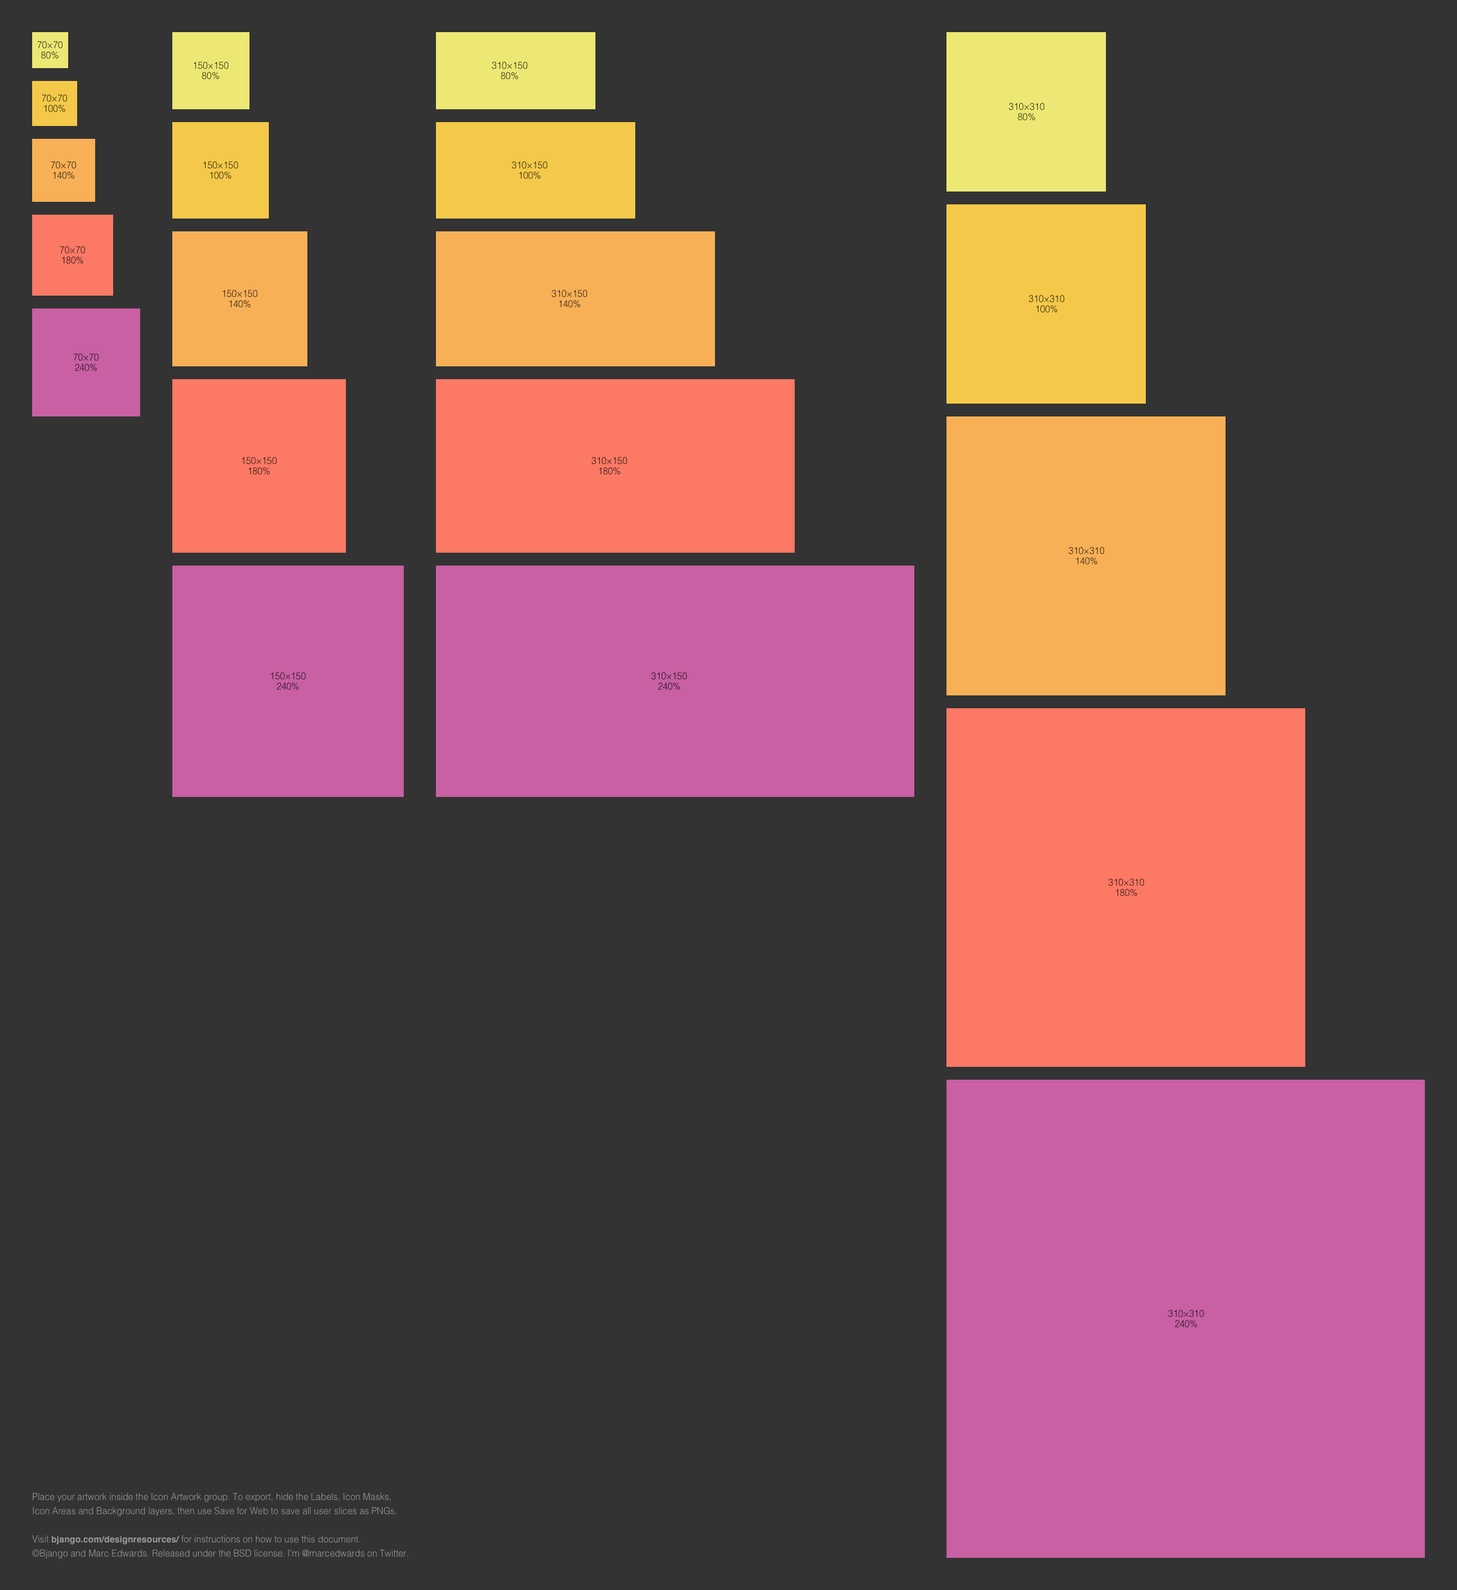
<style>
.page{position:relative;width:1457px;height:1590px;background:#333333}
.page>*{position:absolute;margin:0}
.t1{font:9px/10.3px "Helvetica-Light";color:#2f2e17}
.t2{font:9px/10.3px "Helvetica-Light";color:#31280f}
.t3{font:9px/10.3px "Helvetica-Light";color:#322311}
.t4{font:9px/10.3px "Helvetica-Light";color:#321814}
.t5{font:9px/10.3px "Helvetica-Light"}
.t6{font:9px/10.3px "Helvetica-Light";color:#281321}
.t7{font:9px/14.1px "Helvetica-Light";color:#999999}
.t8{font:9px/14.1px "Helvetica-Bold";color:#999999}
</style>
<div class="page">
<p class="t1" style="left:37px;top:41px;width:26px;height:18px;text-align:center">70×70<br>80%</p>
<p class="t1" style="left:194px;top:62px;width:35px;height:18px;text-align:center">150×150<br>80%</p>
<p class="t1" style="left:492px;top:62px;width:36px;height:18px;text-align:center">310×150<br>80%</p>
<p class="t2" style="left:42px;top:94px;width:26px;height:19px;text-align:center">70×70<br>100%</p>
<p class="t1" style="left:1009px;top:103px;width:36px;height:18px;text-align:center">310×310<br>80%</p>
<p class="t3" style="left:51px;top:161px;width:25px;height:18px;text-align:center">70×70<br>140%</p>
<p class="t2" style="left:203px;top:161px;width:36px;height:18px;text-align:center">150×150<br>100%</p>
<p class="t2" style="left:512px;top:161px;width:36px;height:18px;text-align:center">310×150<br>100%</p>
<p class="t4" style="left:60px;top:246px;width:26px;height:18px;text-align:center">70×70<br>180%</p>
<p class="t3" style="left:222px;top:290px;width:36px;height:18px;text-align:center">150×150<br>140%</p>
<p class="t3" style="left:552px;top:290px;width:36px;height:18px;text-align:center">310×150<br>140%</p>
<p class="t2" style="left:1029px;top:295px;width:36px;height:18px;text-align:center">310×310<br>100%</p>
<p class="t5" style="left:73px;top:354px;width:26px;height:18px;text-align:center">70×70<br>240%</p>
<p class="t4" style="left:242px;top:457px;width:35px;height:18px;text-align:center">150×150<br>180%</p>
<p class="t4" style="left:591px;top:457px;width:36px;height:18px;text-align:center">310×150<br>180%</p>
<p class="t3" style="left:1068px;top:547px;width:36px;height:18px;text-align:center">310×310<br>140%</p>
<p class="t6" style="left:271px;top:672px;width:35px;height:18px;text-align:center">150×150<br>240%</p>
<p class="t6" style="left:651px;top:672px;width:36px;height:18px;text-align:center">310×150<br>240%</p>
<p class="t4" style="left:1108px;top:879px;width:36px;height:18px;text-align:center">310×310<br>180%</p>
<p class="t6" style="left:1168px;top:1310px;width:36px;height:18px;text-align:center">310×310<br>240%</p>
<p class="t7" style="left:32px;top:1493px;width:376px;height:66px">Place your artwork inside the Icon Artwork group. To export, hide the Labels, Icon Masks,<br>Icon Areas and Background layers, then use Save for Web to save all user slices as PNGs.<br><br>Visit <span class="t8">bjango.com/designresources/ </span>for instructions on how to use this document.<br>©Bjango and Marc Edwards. Released under the BSD license. I’m @marcedwards on Twitter.</p>
</div>
